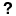
<style>
.page{position:relative;width:16px;height:16px;background:#fffffe}
.page>*{position:absolute;margin:0}
.t1{font:16.7px "Helvetica-Bold";color:#000000}
</style>
<div class="page">
<p class="t1" style="left:3px;top:2px;width:9px;height:12px">?</p>
</div>
